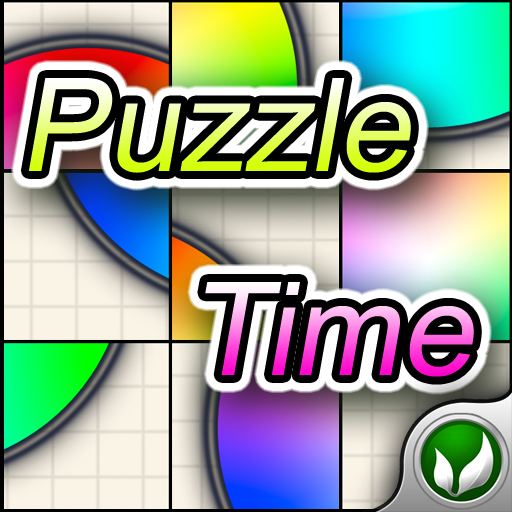
<style>
.page{position:relative;width:512px;height:512px}
.page>*{position:absolute;margin:0}
.t1{font:130px "ArialMT";font-style:italic}
</style>
<div class="page">
<p class="t1" style="left:28px;top:78px;width:383px;height:95px">Puzzle</p>
<p class="t1" style="left:205px;top:282px;width:269px;height:95px">Time</p>
</div>
